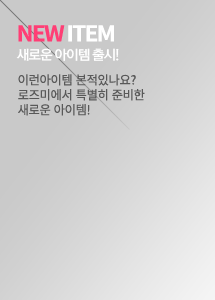
<style>
.page{position:relative;width:215px;height:300px}
.page>*{position:absolute;margin:0}
.t1{font:21.9px "NotoSansCJKkr-Bold";letter-spacing:-0.075em;color:#ffffff;scale:1.03 1}
.t2{font:21.9px "NotoSansCJKkr-Bold";letter-spacing:-0.075em;color:#ff3e75;scale:1.03 1}
.t3{font:13.4px "RixGoB";letter-spacing:-0.075em;color:#ffffff;scale:1.05 1}
.t4{font:12.5px "NotoSansCJKkr-Regular";letter-spacing:-0.025em;color:#585858}
</style>
<div class="page">
<p class="t1" style="left:18px;top:25px;width:96px;height:17px"><span class="t2">NEW </span>ITEM</p>
<p class="t3" style="left:16px;top:48px;width:103px;height:13px">새로운 아이템 출시!</p>
<p class="t4" style="left:18px;top:74px;width:127px;height:42px">이런아이템 본적있나요?<br>로즈미에서 특별히 준비한 <br>새로운 아이템!</p>
</div>
